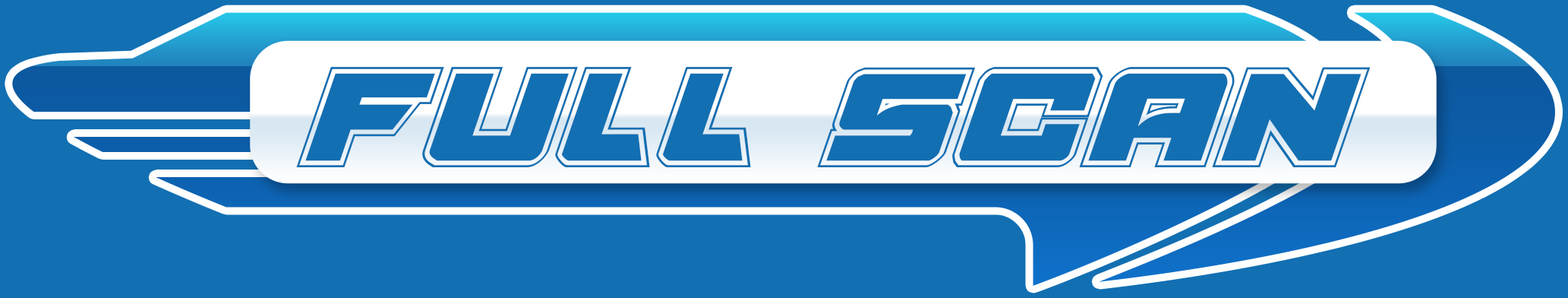
<style>
.page{position:relative;width:1568px;height:298px;background:#126fb2}
.page>*{position:absolute;margin:0}
.t1{font:174px "AircruiserAcademyItalic";color:#126fb2}
</style>
<div class="page">
<p class="t1" style="left:296px;top:67px;width:1075px;height:100px">Full Scan</p>
</div>
